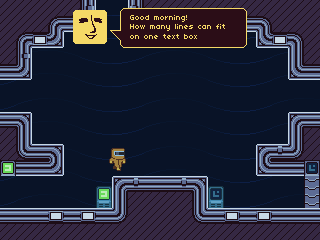
<style>
.page{position:relative;width:320px;height:240px;background:#091327}
.page>*{position:absolute;margin:0}
.t1{font:8px "04b03";color:#f5d966}
</style>
<div class="page">
<p class="t1" style="left:130px;top:15px;width:95px;height:24px">Good morning!<br>How many lines can fit<br>on one text box</p>
</div>
